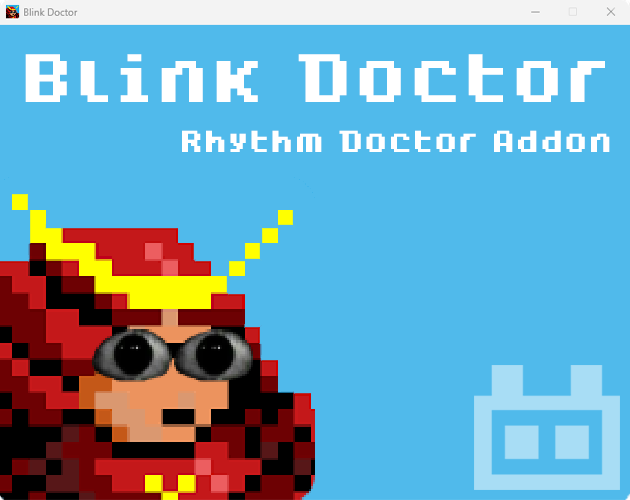
<style>
.page{position:relative;width:630px;height:500px;background:#50baeb}
.page>*{position:absolute;margin:0}
.t1{font:54.5px "Dogica_Pixel_Bold";color:#ffffff}
.t2{font:24.2px "Dogica_Pixel_Bold";color:#ffffff}
</style>
<div class="page">
<p class="t1" style="left:25px;top:54px;width:580px;height:48px">Blink Doctor</p>
<p class="t2" style="left:182px;top:130px;width:428px;height:22px">Rhythm Doctor Addon</p>
</div>
